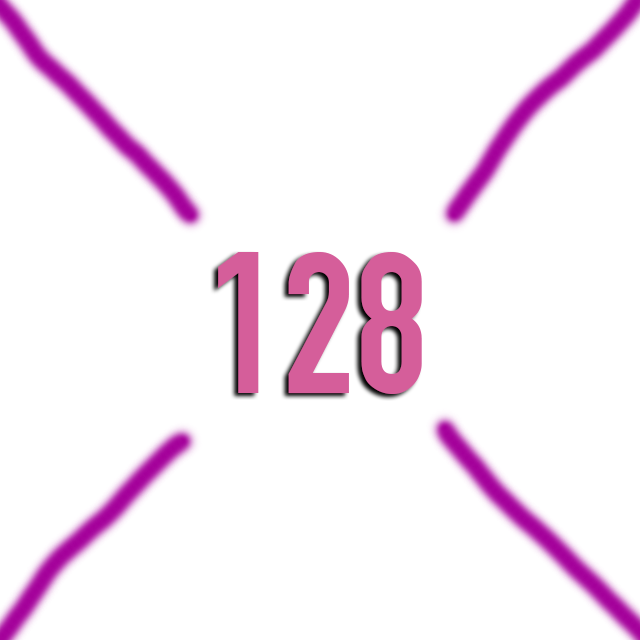
<style>
.page{position:relative;width:640px;height:640px;background:#ffffff}
.page>*{position:absolute;margin:0}
.t1{font:211px "TGL0-1451Engschrift";color:#d55e9a}
</style>
<div class="page">
<p class="t1" style="left:218px;top:252px;width:204px;height:142px">128</p>
</div>
